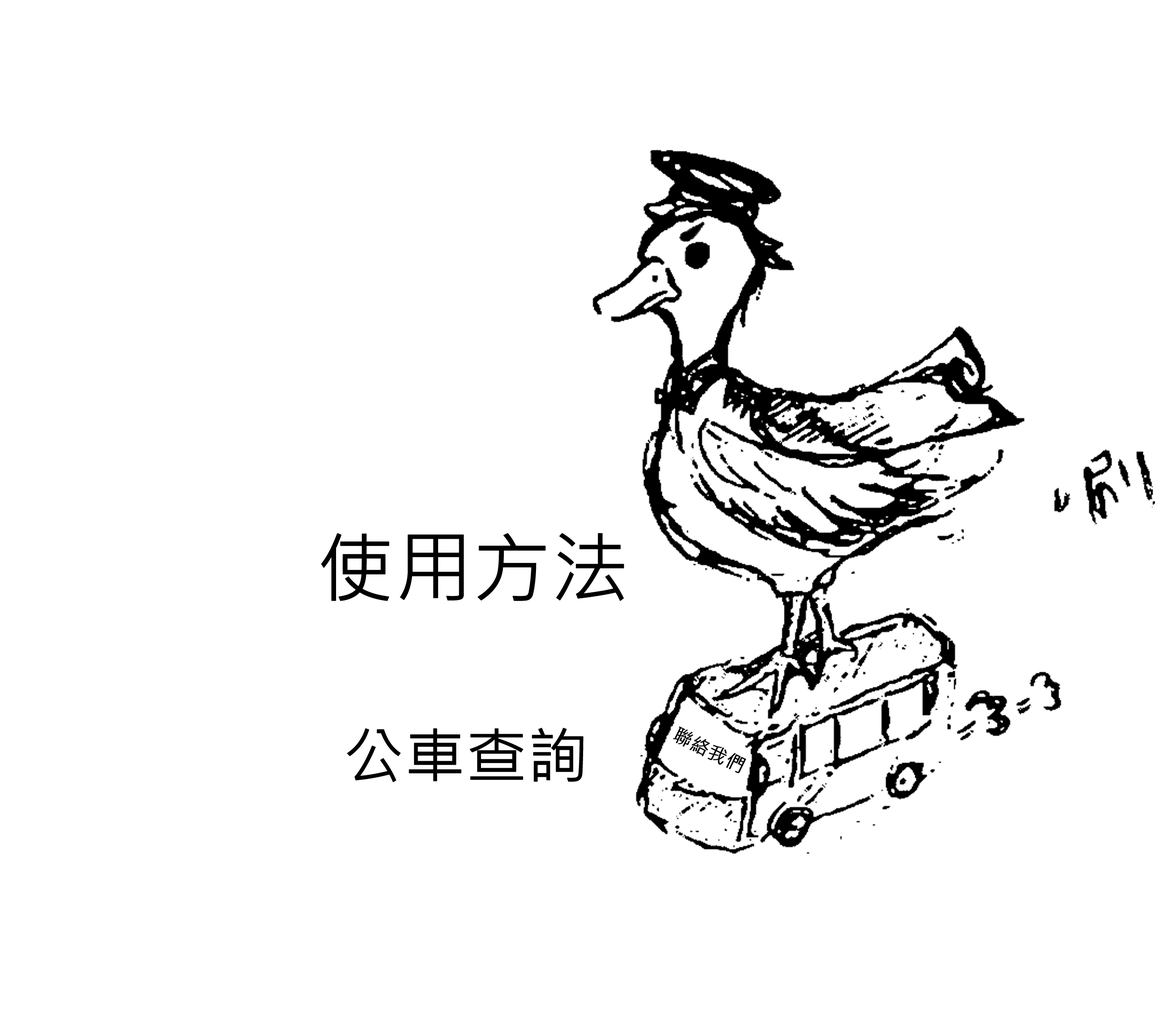
<style>
.page{position:relative;width:1155px;height:1032px;background:#ffffff}
.page>*{position:absolute;margin:0}
.t1{font:76.3px "MicrosoftJhengHeiRegular";color:#000000;font-weight:bold}
.t2{font:59.8px "MicrosoftJhengHeiRegular";color:#000000;font-weight:bold}
.t3{font:18.9px "MicrosoftJhengHeiRegular";color:#000000;font-weight:bold}
</style>
<div class="page">
<p class="t1" style="left:321px;top:533px;width:303px;height:68px">使用方法</p>
<p class="t2" style="left:347px;top:728px;width:237px;height:55px">公車查詢</p>
<p class="t3" style="left:673px;top:727px;width:73px;height:47px;rotate:26deg">聯絡我們</p>
</div>
